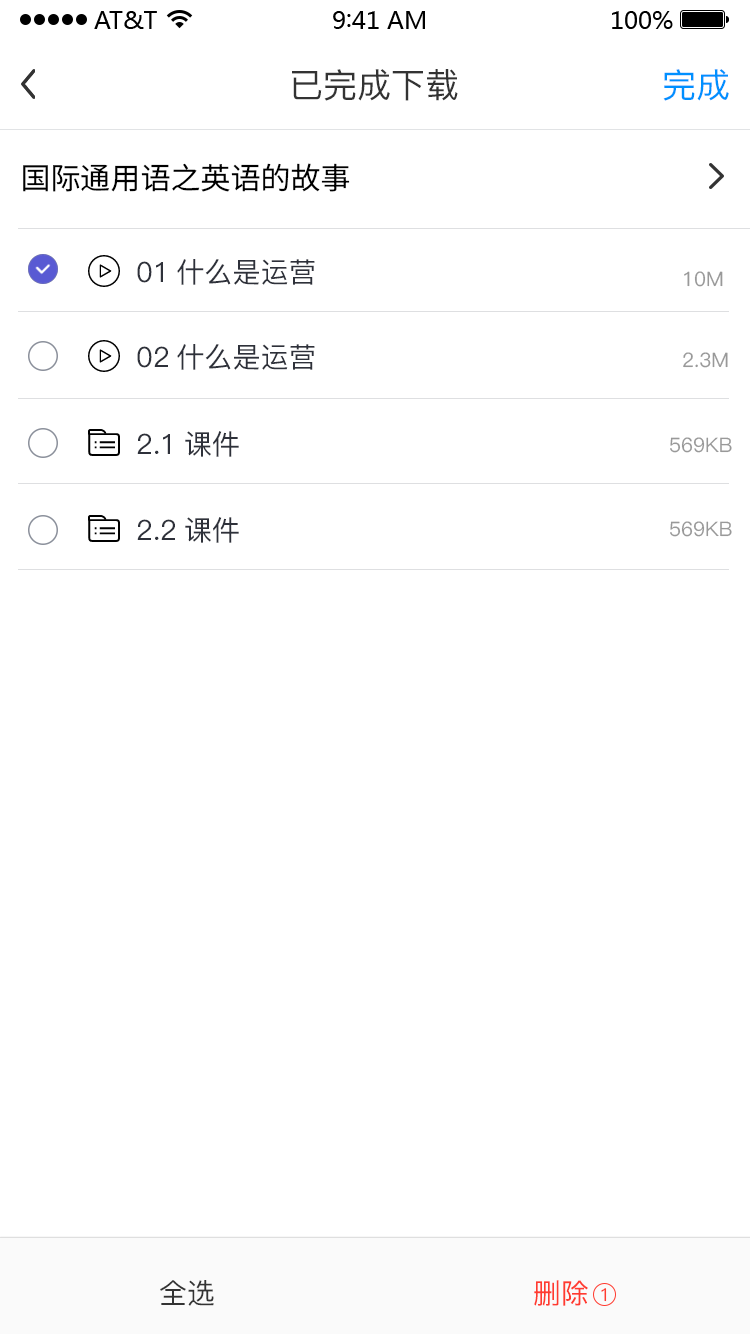
<style>
.page{position:relative;width:750px;height:1334px;background:#ffffff}
.page>*{position:absolute;margin:0}
.t1{font:34px "PingFang-SC-Medium";color:#333333}
.t2{font:34px "PingFang-SC-Medium";color:#0090ff}
.t3{font:30px "SourceHanSansCN-Regular";color:#000000}
.t4{font:28px "PingFang-SC-Medium";color:#2e313a}
.t5{font:20px "PingFang-SC-Medium";color:#999999}
.t6{font:28px "PingFang-SC-Medium";color:#333333}
.t7{font:28px "PingFang-SC-Medium";color:#ff3b30}
.t8{font:18px "PingFang-SC-Medium";color:#ff3b30}
</style>
<div class="page">
<p class="t1" style="left:292px;top:69px;width:166px;height:32px">已完成下载</p>
<p class="t2" style="left:663px;top:69px;width:66px;height:32px">完成</p>
<p class="t3" style="left:23px;top:163px;width:327px;height:29px">国际通用语之英语的故事</p>
<p class="t4" style="left:137px;top:259px;width:178px;height:26px">01什么是运营</p>
<p class="t5" style="left:684px;top:271px;width:39px;height:16px">10M</p>
<p class="t4" style="left:137px;top:344px;width:178px;height:26px">02什么是运营</p>
<p class="t5" style="left:683px;top:352px;width:45px;height:16px">2.3M</p>
<p class="t4" style="left:137px;top:431px;width:102px;height:26px">2.1课件</p>
<p class="t5" style="left:670px;top:437px;width:62px;height:16px">569KB</p>
<p class="t4" style="left:137px;top:517px;width:102px;height:26px">2.2课件</p>
<p class="t5" style="left:670px;top:521px;width:62px;height:16px">569KB</p>
<p class="t6" style="left:160px;top:1280px;width:54px;height:26px">全选</p>
<p class="t7" style="left:534px;top:1280px;width:54px;height:26px">删除</p>
<p class="t8" style="left:601px;top:1288px;width:6px;height:14px">1</p>
</div>
